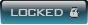
<style>
.page{position:relative;width:88px;height:25px}
.page>*{position:absolute;margin:0}
.t1{font:13px "BankGothicBT-Medium";letter-spacing:-0.1em;color:#cccccc}
</style>
<div class="page">
<p class="t1" style="left:11px;top:9px;width:52px;height:7px">LOCKED</p>
</div>
